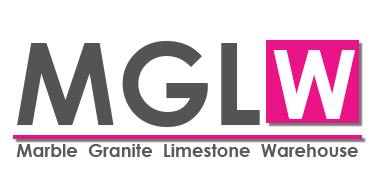
<style>
.page{position:relative;width:376px;height:196px;background:#ffffff}
.page>*{position:absolute;margin:0}
.t1{font:114px "CenturyGothic-Bold";color:#555354}
.t2{font:96px "CenturyGothic-Bold";color:#ffffff}
.t3{font:18px "CenturyGothic-Bold";color:#5b595a}
</style>
<div class="page">
<p class="t1" style="left:17px;top:41px;width:243px;height:86px">MGL</p>
<p class="t2" style="left:273px;top:50px;width:82px;height:69px">W</p>
<p class="t3" style="left:16px;top:144px;width:342px;height:13px">Marble  Granite  Limestone  Warehouse</p>
</div>
